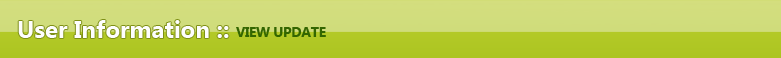
<style>
.page{position:relative;width:781px;height:58px}
.page>*{position:absolute;margin:0}
.t1{font:24px "SegoeUI-Bold";color:#fefefe}
.t2{font:14px "SegoeUI-Bold";letter-spacing:-0.025em;color:#336600}
</style>
<div class="page">
<p class="t1" style="left:18px;top:20px;width:211px;height:18px">User Information ::</p>
<p class="t2" style="left:236px;top:27px;width:90px;height:10px">VIEW UPDATE</p>
</div>
